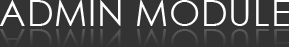
<style>
.page{position:relative;width:289px;height:47px;background:#333333}
.page>*{position:absolute;margin:0}
.t1{font:36px "CenturyGothic";letter-spacing:0.02em;color:#ffffff}
.t2{font:36px "CenturyGothic";letter-spacing:0.02em;color:#494949}
</style>
<div class="page">
<p class="t1" style="left:0px;top:0px;width:289px;height:26px">ADMIN MODULE</p>
<p class="t2" style="left:0px;top:29px;width:289px;height:18px">ADMIN MODULE</p>
</div>
